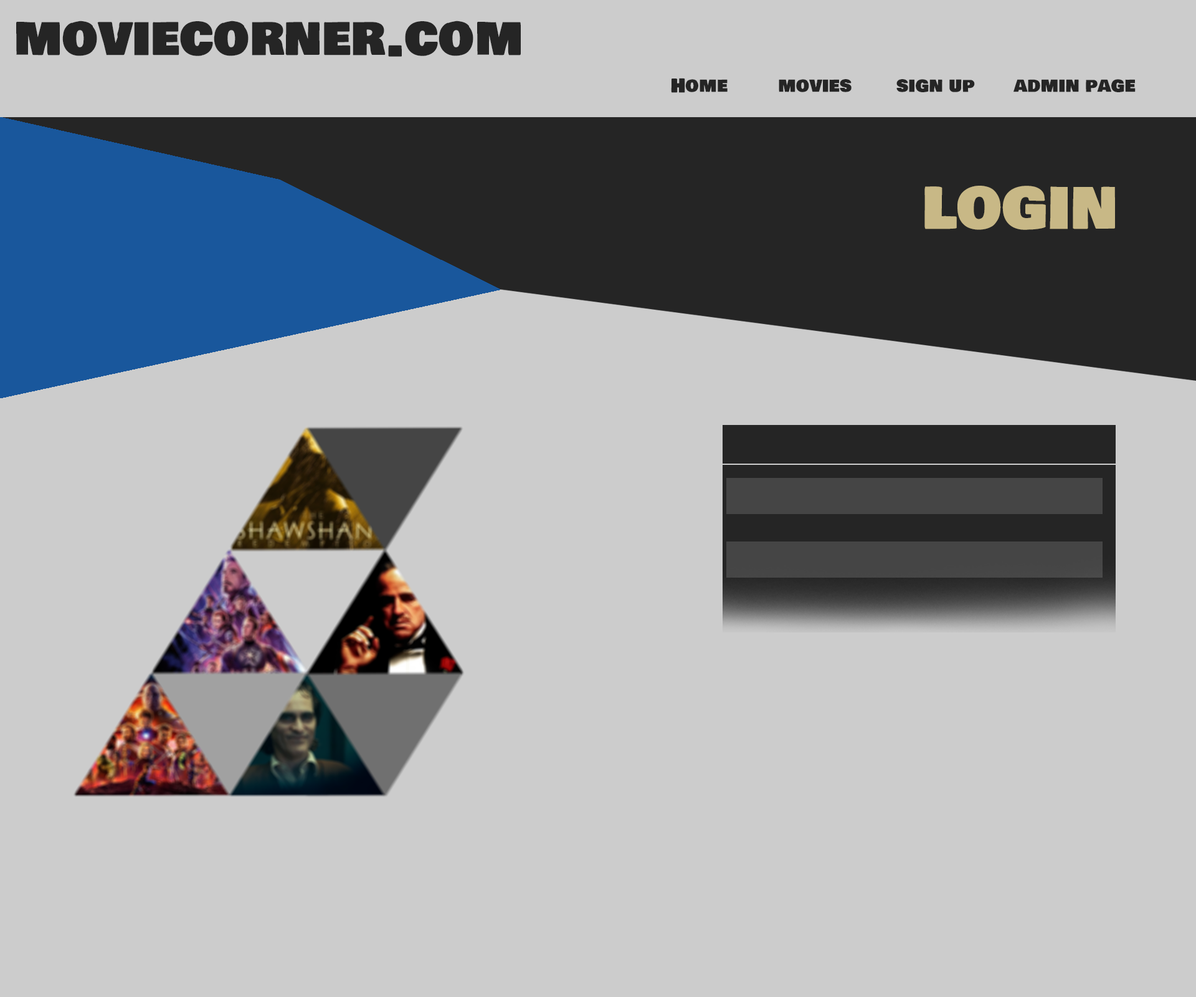
<style>
.page{position:relative;width:1196px;height:997px;background:#cccccc}
.page>*{position:absolute;margin:0}
.t1{font:50.5px "BowlbyOneSC-Regular";color:#252525}
.t2{font:18.7px "BowlbyOneSC-Regular";color:#252525}
.t3{font:56.1px "BowlbyOneSC-Regular";color:#c8b886}
</style>
<div class="page">
<p class="t1" style="left:16px;top:21px;width:505px;height:36px">moviecorner.com</p>
<p class="t2" style="left:671px;top:78px;width:465px;height:15px">Home         movies        sign up       admin page</p>
<p class="t3" style="left:925px;top:186px;width:190px;height:44px">LOGIN</p>
</div>
